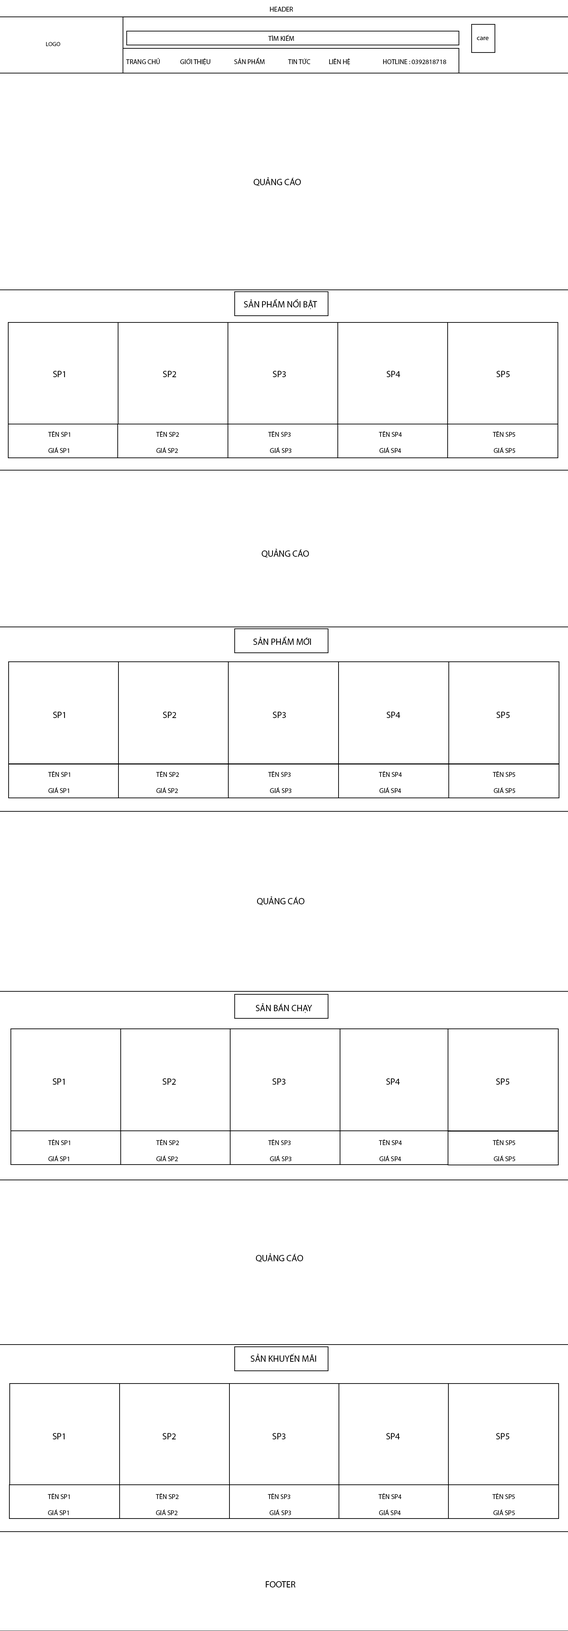
<style>
.page{position:relative;width:568px;height:1631px;background:#ffffff}
.page>*{position:absolute;margin:0}
.t1{font:6.8px "MyriadPro-Regular";color:#000000}
.t2{font:6px "MyriadPro-Regular";color:#000000}
.t3{font:6.7px "MyriadPro-Regular";color:#000000}
.t4{font:9px "MyriadPro-Regular";color:#000000;text-transform:uppercase}
.t5{font:9px "MyriadPro-Regular";color:#000000}
</style>
<div class="page">
<p class="t1" style="left:270px;top:7px;width:23px;height:5px">HEADER</p>
<p class="t1" style="left:268px;top:34px;width:26px;height:7px">TÌM KIẾM</p>
<p class="t1" style="left:477px;top:37px;width:12px;height:3px">care</p>
<p class="t2" style="left:46px;top:42px;width:14px;height:4px">LOGO</p>
<p class="t3" style="left:126px;top:58px;width:320px;height:7px">TRANG CHỦ   GIỚI THIỆU  SẢN PHẨM   TIN TỨC  LIÊN HỆ   HOTLINE : 0392818718</p>
<p class="t4" style="left:254px;top:177px;width:47px;height:9px">quảng cáo</p>
<p class="t5" style="left:244px;top:299px;width:73px;height:10px">SẢN PHẨM NỔI BẬT</p>
<p class="t5" style="left:53px;top:371px;width:457px;height:6px">SP1            SP2             SP3                SP4               SP5</p>
<p class="t1" style="left:48px;top:431px;width:467px;height:22px">TÊN SP1       TÊN SP2          TÊN SP3            TÊN SP4               TÊN SP5<br><br>GIÁ SP1       GIÁ SP2           GIÁ SP3           GIÁ SP4       GIÁ SP5</p>
<p class="t4" style="left:262px;top:549px;width:47px;height:9px">quảng cáo</p>
<p class="t5" style="left:253px;top:636px;width:58px;height:9px">SẢN PHẨM MỚI</p>
<p class="t5" style="left:53px;top:712px;width:457px;height:6px">SP1            SP2             SP3                SP4               SP5</p>
<p class="t1" style="left:48px;top:771px;width:467px;height:22px">TÊN SP1       TÊN SP2          TÊN SP3            TÊN SP4               TÊN SP5<br><br>GIÁ SP1       GIÁ SP2           GIÁ SP3           GIÁ SP4       GIÁ SP5</p>
<p class="t4" style="left:257px;top:896px;width:47px;height:9px">quảng cáo</p>
<p class="t5" style="left:256px;top:1003px;width:56px;height:10px">SẢN BÁN CHẠY</p>
<p class="t5" style="left:52px;top:1078px;width:458px;height:7px">SP1            SP2             SP3                SP4               SP5</p>
<p class="t1" style="left:48px;top:1140px;width:467px;height:21px">TÊN SP1       TÊN SP2          TÊN SP3            TÊN SP4               TÊN SP5<br><br>GIÁ SP1       GIÁ SP2           GIÁ SP3           GIÁ SP4       GIÁ SP5</p>
<p class="t4" style="left:256px;top:1253px;width:47px;height:9px">quảng cáo</p>
<p class="t5" style="left:250px;top:1354px;width:66px;height:8px">SẢN KHUYẾN MÃI</p>
<p class="t5" style="left:52px;top:1433px;width:458px;height:7px">SP1            SP2             SP3                SP4               SP5</p>
<p class="t1" style="left:48px;top:1494px;width:467px;height:21px">TÊN SP1       TÊN SP2          TÊN SP3            TÊN SP4               TÊN SP5<br><br>GIÁ SP1       GIÁ SP2           GIÁ SP3           GIÁ SP4       GIÁ SP5</p>
<p class="t4" style="left:266px;top:1581px;width:30px;height:7px">footer</p>
</div>
